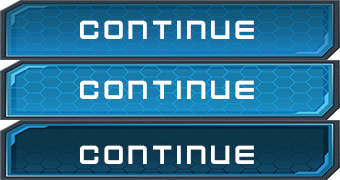
<style>
.page{position:relative;width:340px;height:180px}
.page>*{position:absolute;margin:0}
.t1{font:29.2px "KenVector-Future";color:#ffffff}
</style>
<div class="page">
<p class="t1" style="left:80px;top:20px;width:174px;height:19px">CONTINUE</p>
<p class="t1" style="left:80px;top:80px;width:174px;height:19px">CONTINUE</p>
<p class="t1" style="left:80px;top:145px;width:174px;height:19px">CONTINUE</p>
</div>
